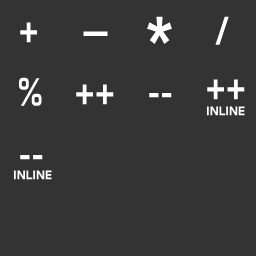
<style>
.page{position:relative;width:256px;height:256px;background:#333333}
.page>*{position:absolute;margin:0}
.t1{font:93.8px "Moire-Bold";color:#ffffff;scale:0.85 1}
.t2{font:38px "Moire-Bold";color:#ffffff;scale:0.85 1}
.t3{font:38.4px "Moire-Bold";color:#ffffff;scale:2.17 1}
.t4{font:12px "Moire-Bold";color:#ffffff;scale:0.85 1}
</style>
<div class="page">
<p class="t1" style="left:147px;top:16px;width:25px;height:28px">*</p>
<p class="t2" style="left:215px;top:16px;width:14px;height:29px">/</p>
<p class="t2" style="left:20px;top:22px;width:17px;height:21px">+</p>
<p class="t3" style="left:83px;top:31px;width:25px;height:5px">-</p>
<p class="t2" style="left:19px;top:77px;width:23px;height:29px">%</p>
<p class="t2" style="left:76px;top:84px;width:38px;height:21px">++</p>
<p class="t2" style="left:207px;top:79px;width:38px;height:21px">++</p>
<p class="t2" style="left:149px;top:93px;width:23px;height:5px">--</p>
<p class="t4" style="left:207px;top:106px;width:38px;height:10px">INLINE</p>
<p class="t2" style="left:20px;top:155px;width:23px;height:5px">--</p>
<p class="t4" style="left:14px;top:170px;width:38px;height:10px">INLINE</p>
</div>
